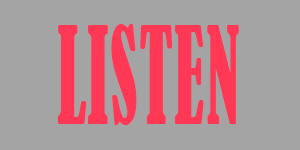
<style>
.page{position:relative;width:300px;height:150px;background:#a4a4a4}
.page>*{position:absolute;margin:0}
.t1{font:125px "BernardMT-Condensed";letter-spacing:0.02em;color:#ff3856;scale:0.58 1}
</style>
<div class="page">
<p class="t1" style="left:57px;top:24px;width:182px;height:101px">LISTEN</p>
</div>
